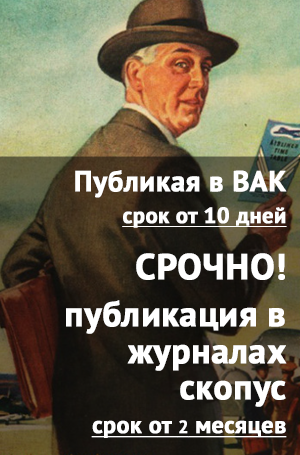
<style>
.page{position:relative;width:300px;height:455px}
.page>*{position:absolute;margin:0}
.t1{font:28.8px "PTSans-Bold";color:#ffffff;font-weight:bold}
.t2{font:22.3px "PTSans-Bold";color:#fefefe;font-weight:bold;text-decoration:underline}
.t3{font:36px "PTSans-Bold";color:#ffffff;font-weight:bold}
.t4{font:35.4px/36.4px "PTSans-Bold";color:#ffffff;font-weight:bold}
.t5{font:23.7px "PTSans-Bold";color:#ffffff;font-weight:bold;text-decoration:underline}
.t6{font:17.7px "PTSans-Bold";color:#ffffff;font-weight:bold;text-decoration:underline}
</style>
<div class="page">
<p class="t1" style="left:75px;top:170px;width:212px;height:28px">Публикая в ВАК</p>
<p class="t2" style="left:122px;top:207px;width:165px;height:21px">срок от 10 дней</p>
<p class="t3" style="left:136px;top:253px;width:149px;height:27px">СРОЧНО!</p>
<p class="t4" style="left:66px;top:300px;width:221px;height:107px;text-align:right">публикация в журналах скопус</p>
<p class="t5" style="left:91px;top:420px;width:196px;height:18px">cрок от <span class="t6">2</span> месяцев</p>
</div>
